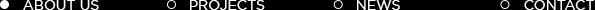
<style>
.page{position:relative;width:595px;height:10px;background:#000000}
.page>*{position:absolute;margin:0}
.t1{font:14px "Gotham-Book";color:#ffffff;text-transform:uppercase}
</style>
<div class="page">
<p class="t1" style="left:23px;top:0px;width:76px;height:10px">About Us</p>
<p class="t1" style="left:190px;top:0px;width:75px;height:10px">projects</p>
<p class="t1" style="left:357px;top:0px;width:43px;height:10px">news</p>
<p class="t1" style="left:524px;top:0px;width:70px;height:10px">contact</p>
</div>
